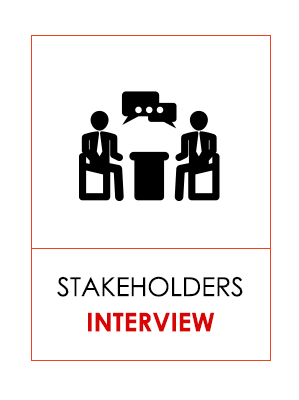
<style>
.page{position:relative;width:299px;height:400px;background:#ffffff}
.page>*{position:absolute;margin:0}
.t1{font:26px/35.4px "CenturyGothic";color:#000000}
.t2{font:26px/35.4px "CenturyGothic-Bold";color:#d80505}
</style>
<div class="page">
<p class="t1" style="left:57px;top:276px;width:186px;height:56px;text-align:center">STAKEHOLDERS<br><span class="t2">INTERVIEW</span></p>
</div>
